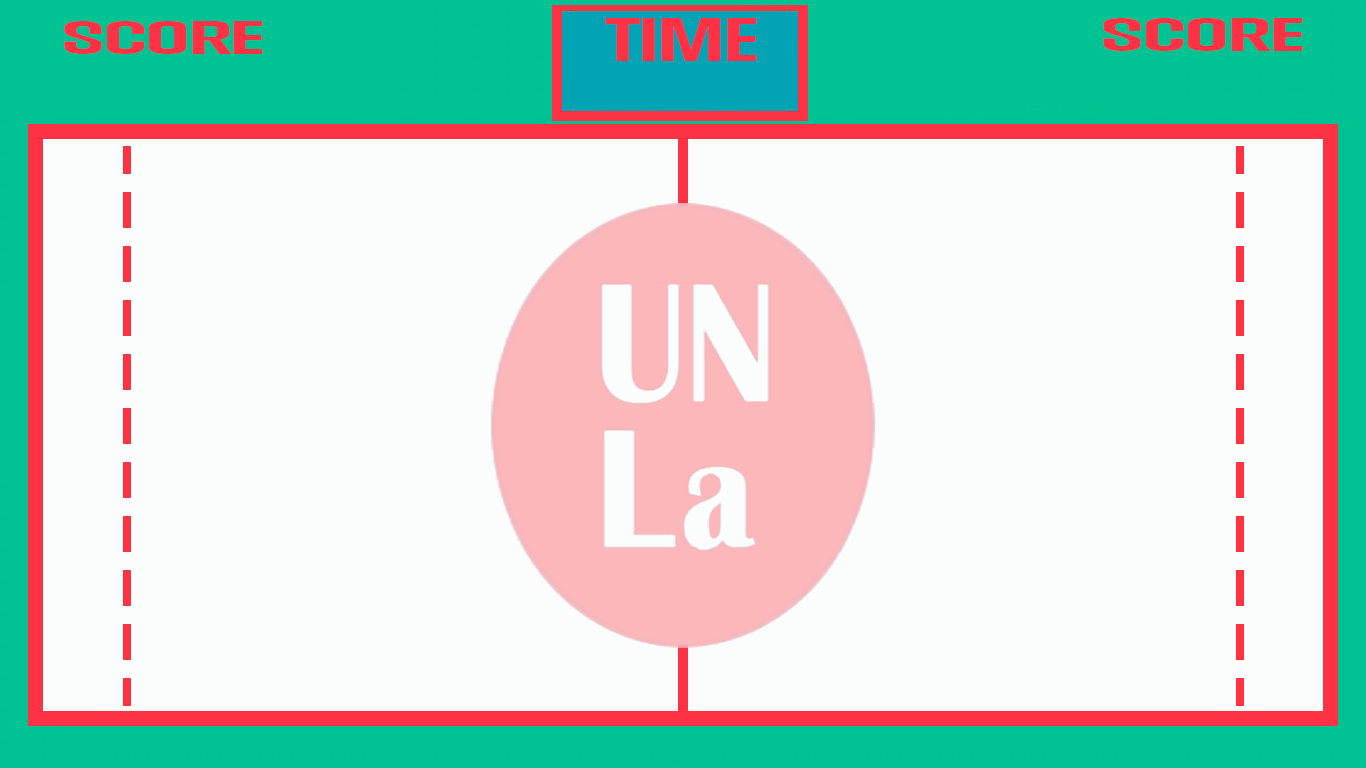
<style>
.page{position:relative;width:1366px;height:768px;background:#fbfdfd}
.page>*{position:absolute;margin:0}
.t1{font:42.9px "TrumpGothicEast-Bold";letter-spacing:-0.02em;color:#ff3144;scale:2.74 1}
.t2{font:56.1px "TrumpGothicEast-Bold";letter-spacing:-0.02em;color:#ff3144;scale:2.09 1}
</style>
<div class="page">
<p class="t1" style="left:64px;top:21px;width:199px;height:33px">SCORE</p>
<p class="t2" style="left:605px;top:18px;width:152px;height:43px">TIME</p>
<p class="t1" style="left:1103px;top:18px;width:200px;height:33px">SCORE</p>
</div>
